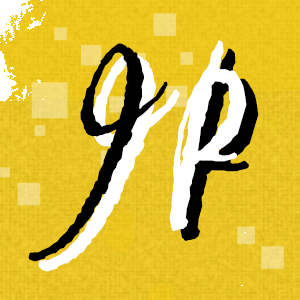
<style>
.page{position:relative;width:300px;height:300px}
.page>*{position:absolute;margin:0}
.t1{font:200px "PabloLetPlain";letter-spacing:0.05em;color:#000000}
.t2{font:200px "PabloLetPlain";letter-spacing:0.05em;color:#ffffff}
</style>
<div class="page">
<p class="t1" style="left:28px;top:40px;width:219px;height:222px;rotate:-3deg">J<span class="t2">P</span></p>
<p class="t2" style="left:38px;top:48px;width:219px;height:222px;rotate:-3deg">J<span class="t1">P</span></p>
<p class="t2" style="left:40px;top:50px;width:219px;height:222px;rotate:-3deg">J<span class="t1">P</span></p>
</div>
